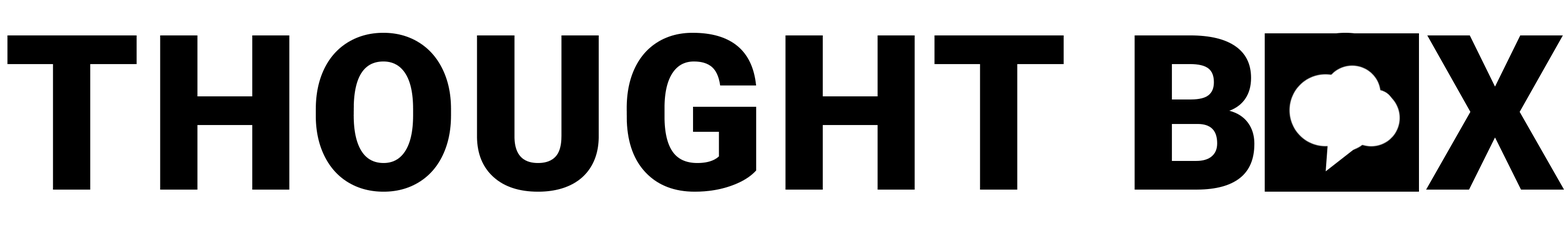
<style>
.page{position:relative;width:1568px;height:225px;background:#ffffff}
.page>*{position:absolute;margin:0}
.t1{font:217.1px "Roboto-Black";color:#000000;text-transform:uppercase}
</style>
<div class="page">
<p class="t1" style="left:7px;top:33px;width:1557px;height:159px">thought box</p>
</div>
